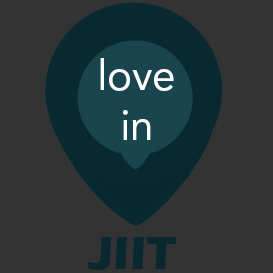
<style>
.page{position:relative;width:273px;height:273px;background:#333333}
.page>*{position:absolute;margin:0}
.t1{font:42px "AvenirLTStd-Roman";color:#ffffff}
.t2{font:48px "ErasITC-Bold";color:#09282f}
</style>
<div class="page">
<p class="t1" style="left:100px;top:58px;width:74px;height:82px;text-align:center">love<br>in</p>
<p class="t2" style="left:88px;top:237px;width:89px;height:33px">JIIT</p>
</div>
